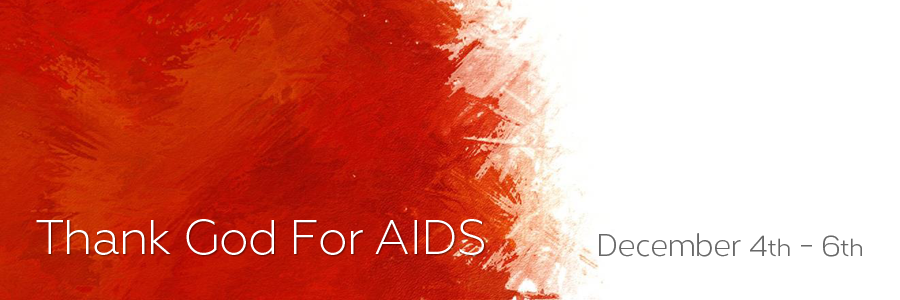
<style>
.page{position:relative;width:900px;height:300px;background:#ffffff}
.page>*{position:absolute;margin:0}
.t1{font:48px "Geometria-Light";letter-spacing:-0.02em;color:#ffffff}
.t2{font:30px "Corbert-Regular";letter-spacing:-0.02em;color:#686868}
.t3{font:24px "Corbert-Regular";letter-spacing:-0.02em;color:#686868}
</style>
<div class="page">
<p class="t1" style="left:36px;top:219px;width:448px;height:36px">Thank God For AIDS</p>
<p class="t2" style="left:599px;top:233px;width:263px;height:24px">December 4<span class="t3">th</span> - 6<span class="t3">th</span></p>
</div>
